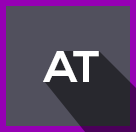
<style>
.page{position:relative;width:136px;height:132px;background:#51505d}
.page>*{position:absolute;margin:0}
.t1{font:44px "NexaBold";color:#ffffff}
</style>
<div class="page">
<p class="t1" style="left:43px;top:51px;width:56px;height:31px">AT</p>
</div>
